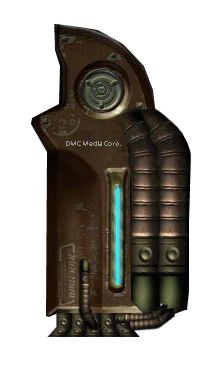
<style>
.page{position:relative;width:218px;height:392px;background:#ffffff}
.page>*{position:absolute;margin:0}
.t1{font:8px "Calibri";color:#989593}
</style>
<div class="page">
<p class="t1" style="left:66px;top:141px;width:55px;height:5px">DMC Media Corp.</p>
</div>
